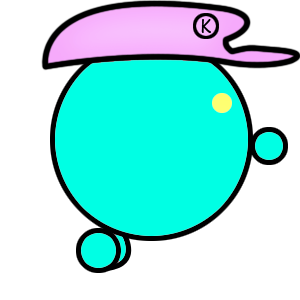
<style>
.page{position:relative;width:300px;height:300px;background:#ffffff}
.page>*{position:absolute;margin:0}
.t1{font:17.6px "ComicSansMS";color:#000000}
</style>
<div class="page">
<p class="t1" style="left:201px;top:19px;width:10px;height:14px">K</p>
</div>
